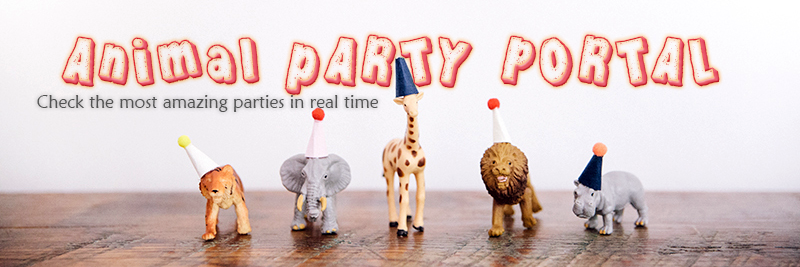
<style>
.page{position:relative;width:800px;height:267px}
.page>*{position:absolute;margin:0}
.t1{font:72px "KGPartyontheRooftop"}
.t2{font:18px "MaiandraGD-Regular";color:#525252}
</style>
<div class="page">
<p class="t1" style="left:61px;top:34px;width:659px;height:61px">Animal pARTY PORTAL</p>
<p class="t2" style="left:37px;top:95px;width:341px;height:17px">Check the most amazing parties in real time</p>
</div>
